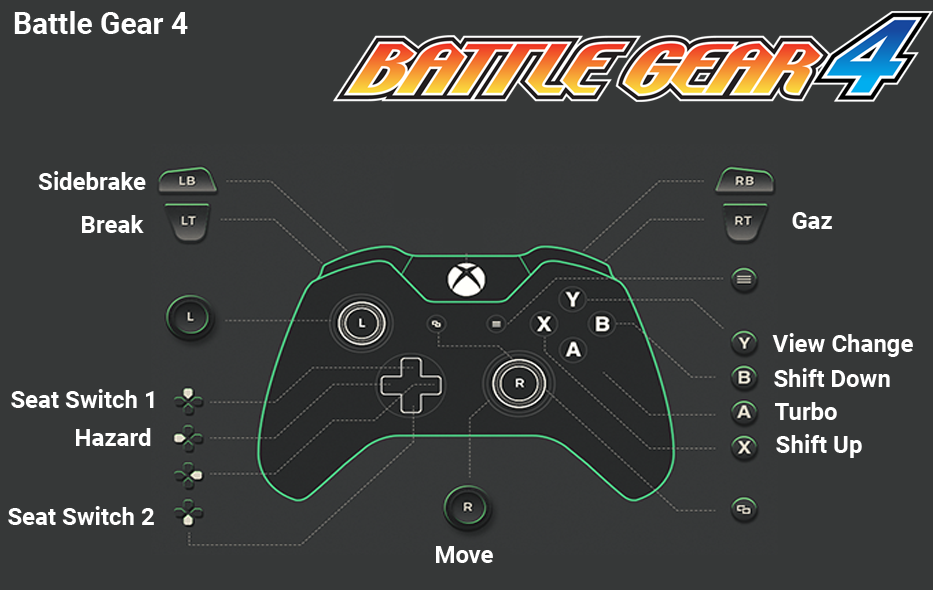
<style>
.page{position:relative;width:933px;height:590px;background:#363838}
.page>*{position:absolute;margin:0}
.t1{font:30px "Roboto-Bold";color:#ffffff}
.t2{font:24px "Roboto-Bold";color:#ffffff}
</style>
<div class="page">
<p class="t1" style="left:14px;top:11px;width:174px;height:23px">Battle Gear 4</p>
<p class="t2" style="left:38px;top:171px;width:108px;height:19px">Sidebrake</p>
<p class="t2" style="left:82px;top:215px;width:62px;height:18px">Break</p>
<p class="t2" style="left:792px;top:212px;width:40px;height:17px">Gaz</p>
<p class="t2" style="left:772px;top:333px;width:141px;height:24px">View Change</p>
<p class="t2" style="left:774px;top:368px;width:116px;height:19px">Shift Down</p>
<p class="t2" style="left:11px;top:389px;width:143px;height:19px">Seat Switch 1</p>
<p class="t2" style="left:775px;top:402px;width:62px;height:18px">Turbo</p>
<p class="t2" style="left:76px;top:428px;width:75px;height:18px">Hazard</p>
<p class="t2" style="left:776px;top:434px;width:86px;height:24px">Shift Up</p>
<p class="t2" style="left:8px;top:506px;width:146px;height:19px">Seat Switch 2</p>
<p class="t2" style="left:436px;top:546px;width:57px;height:17px">Move</p>
</div>
